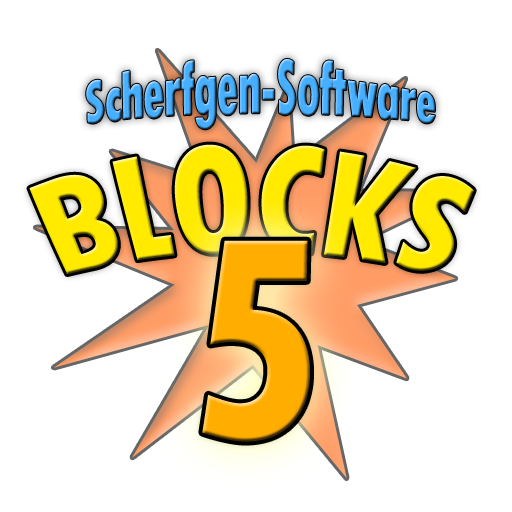
<style>
.page{position:relative;width:512px;height:512px;background:#ffffff}
.page>*{position:absolute;margin:0}
.t1{font:48px "TwCenMT-CondensedExtraBold"}
.t2{font:90px "TwCenMT-CondensedExtraBold";color:#ffea00}
.t3{font:300px "TwCenMT-CondensedExtraBold";color:#ffae00}
</style>
<div class="page">
<p class="t1" style="left:86px;top:59px;width:349px;height:71px">Scherfgen-Software</p>
<p class="t2" style="left:29px;top:144px;width:445px;height:130px">BLOCKS</p>
<p class="t3" style="left:202px;top:240px;width:108px;height:202px">5</p>
</div>
